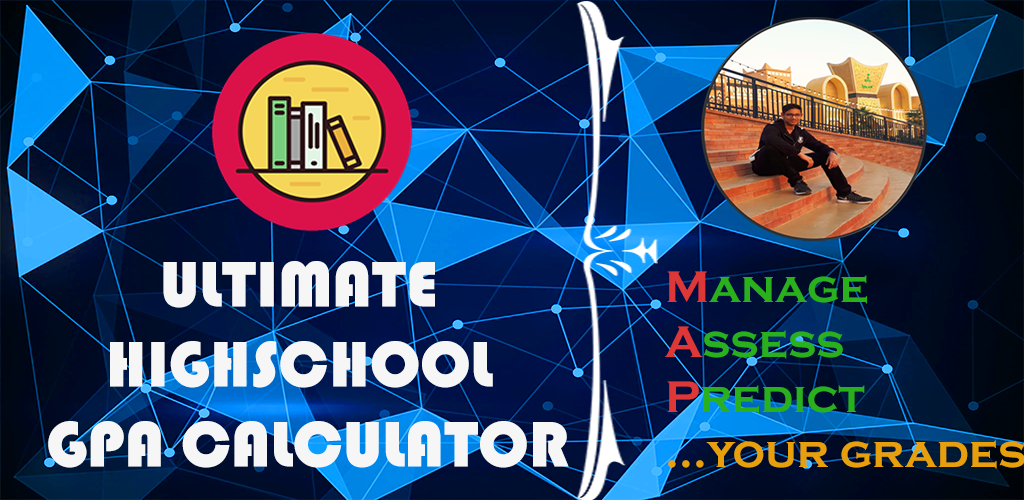
<style>
.page{position:relative;width:1024px;height:500px}
.page>*{position:absolute;margin:0}
.t1{font:66.7px "Bauhaus93";color:#f6f6f6}
.t2{font:45.8px "CopperplateGothic-Bold";color:#e7a10c}
.t3{font:45.8px "CopperplateGothic-Bold";color:#dd3737}
.t4{font:45.8px "CopperplateGothic-Bold";color:#2ab01c}
</style>
<div class="page">
<p class="t1" style="left:48px;top:261px;width:521px;height:207px;text-align:center">ULTIMATE <br>HIGHSCHOOL <br>GPA CALCULATOR</p>
<p class="t2" style="left:665px;top:271px;width:360px;height:198px"><span class="t3">M</span><span class="t4">anage<br></span><span class="t3">A</span><span class="t4">ssess<br></span><span class="t3">P</span><span class="t4">redict<br></span>...your grades</p>
</div>
